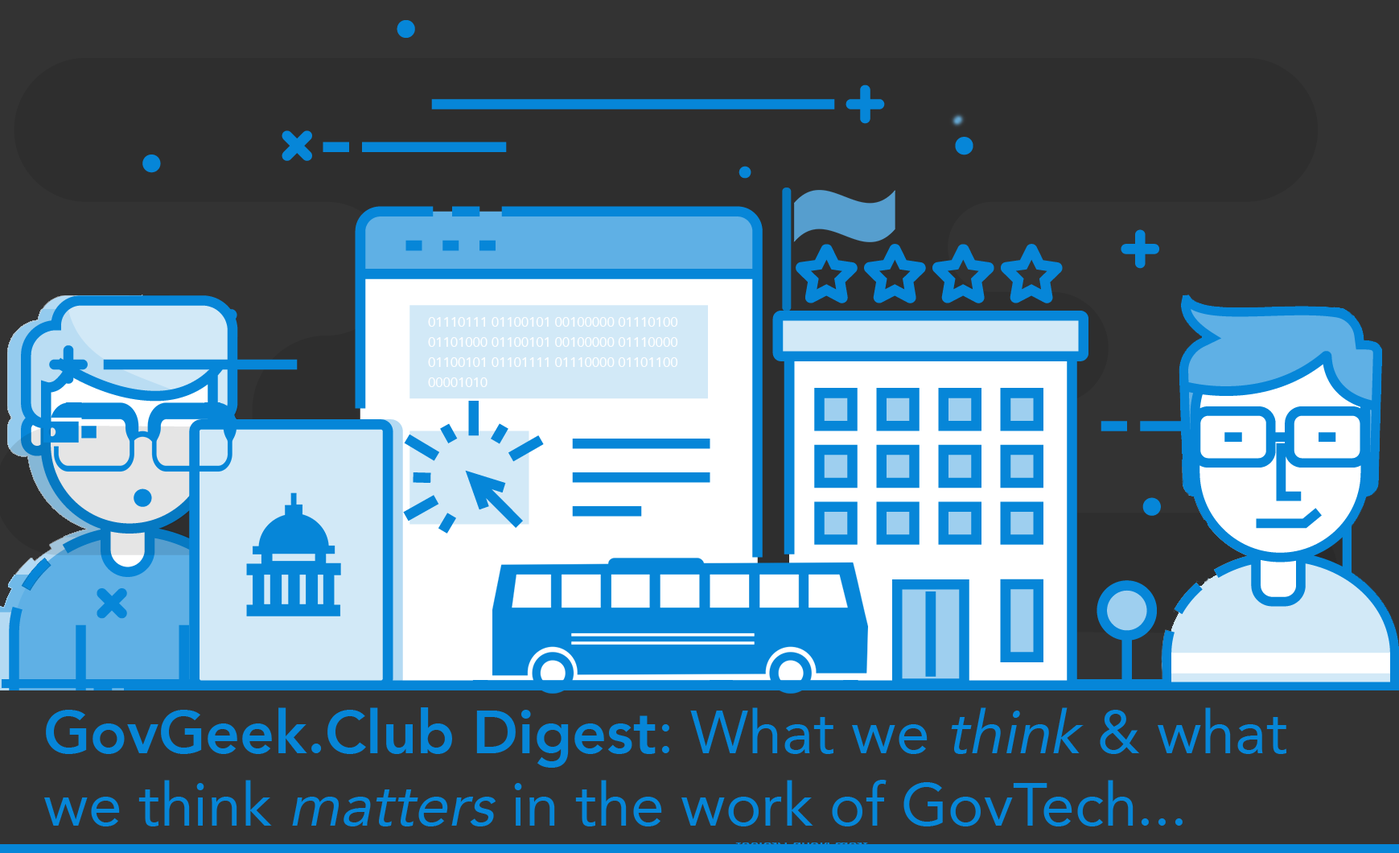
<style>
.page{position:relative;width:1399px;height:853px;background:#333333}
.page>*{position:absolute;margin:0}
.t1{font:13.4px/20.1px "Avenir-Roman";color:#ffffff}
.t2{font:60.3px "Avenir-Roman";color:#0686d8}
.t3{font:60.3px "Avenir-Heavy";color:#0686d8}
.t4{font:60.3px "Avenir-Roman";color:#0686d8;font-style:italic}
</style>
<div class="page">
<p class="t1" style="left:428px;top:317px;width:250px;height:70px">01110111 01100101 00100000 01110100 01101000 01100101 00100000 01110000 01100101 01101111 01110000 01101100 00001010</p>
<p class="t2" style="left:44px;top:707px;width:1242px;height:119px"><span class="t3">GovGeek.Club Digest</span>: What we <span class="t4">think </span>&amp; what we think <span class="t4">matters </span>in the work of GovTech...</p>
</div>
